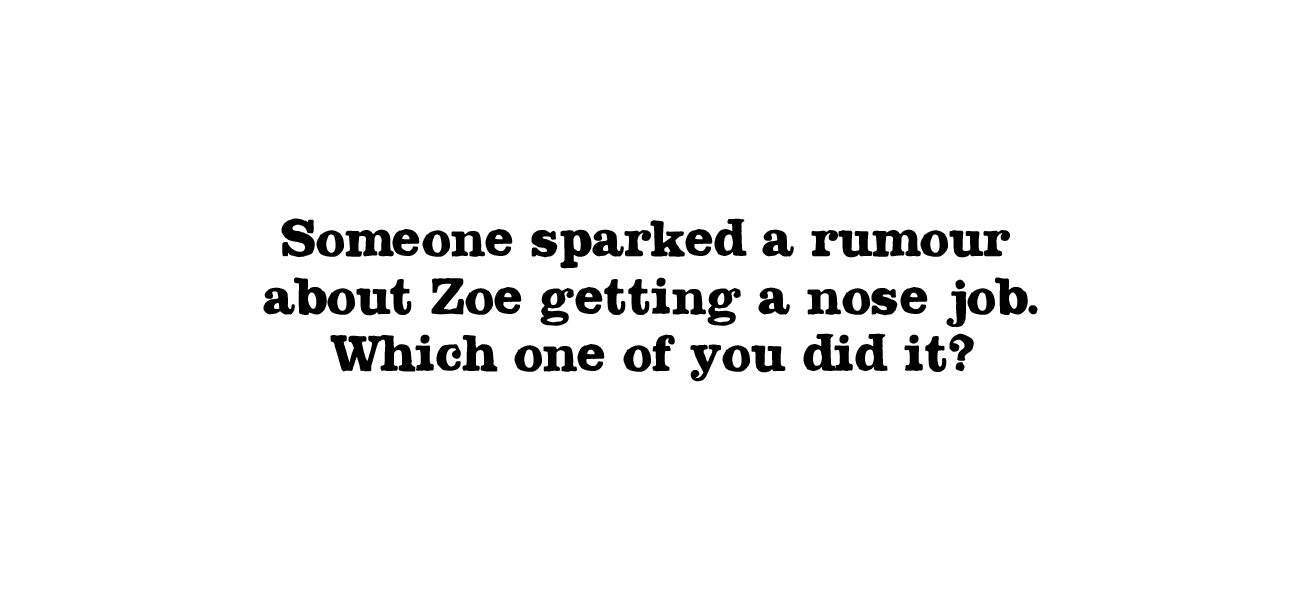
<style>
.page{position:relative;width:1300px;height:600px;background:#ffffff}
.page>*{position:absolute;margin:0}
.t1{font:48px "LSTKClarendonBold";letter-spacing:0.05em;color:#000000}
</style>
<div class="page">
<p class="t1" style="left:263px;top:218px;width:775px;height:164px;text-align:center">Someone sparked a rumour <br>about Zoe getting a nose job.<br>Which one of you did it?</p>
</div>
